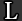
<style>
.page{position:relative;width:22px;height:21px;background:#333333}
.page>*{position:absolute;margin:0}
.t1{font:22px "RyuminPro-ExBold";letter-spacing:-0.08em;color:#ffffff;scale:0.9 1}
</style>
<div class="page">
<p class="t1" style="left:5px;top:2px;width:13px;height:17px">L</p>
</div>
